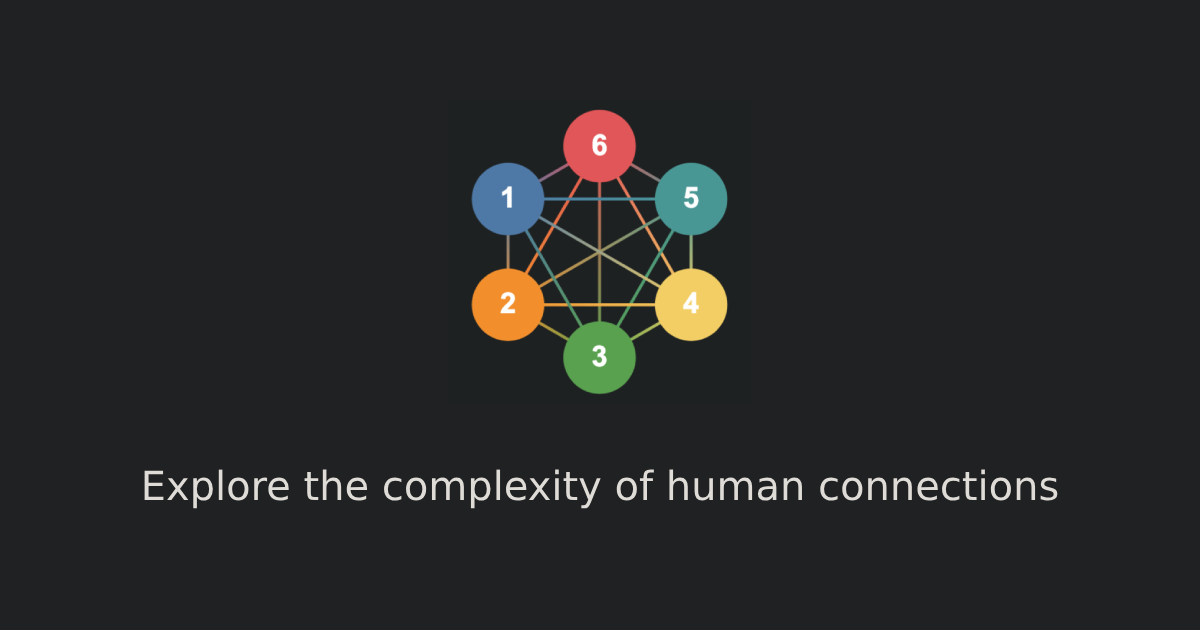
<style>
.page{position:relative;width:1200px;height:630px;background:#1f2122}
.page>*{position:absolute;margin:0}
.t1{font:40px "DejaVuSans";color:#dfdcd7}
</style>
<div class="page">
<p class="t1" style="left:144px;top:469px;width:914px;height:40px">Explore the complexity of human connections</p>
</div>
